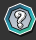
<style>
.page{position:relative;width:36px;height:40px;background:#333333}
.page>*{position:absolute;margin:0}
.t1{font:24.7px "Algerian";color:#ffffff}
</style>
<div class="page">
<p class="t1" style="left:15px;top:11px;width:11px;height:17px">?</p>
</div>
